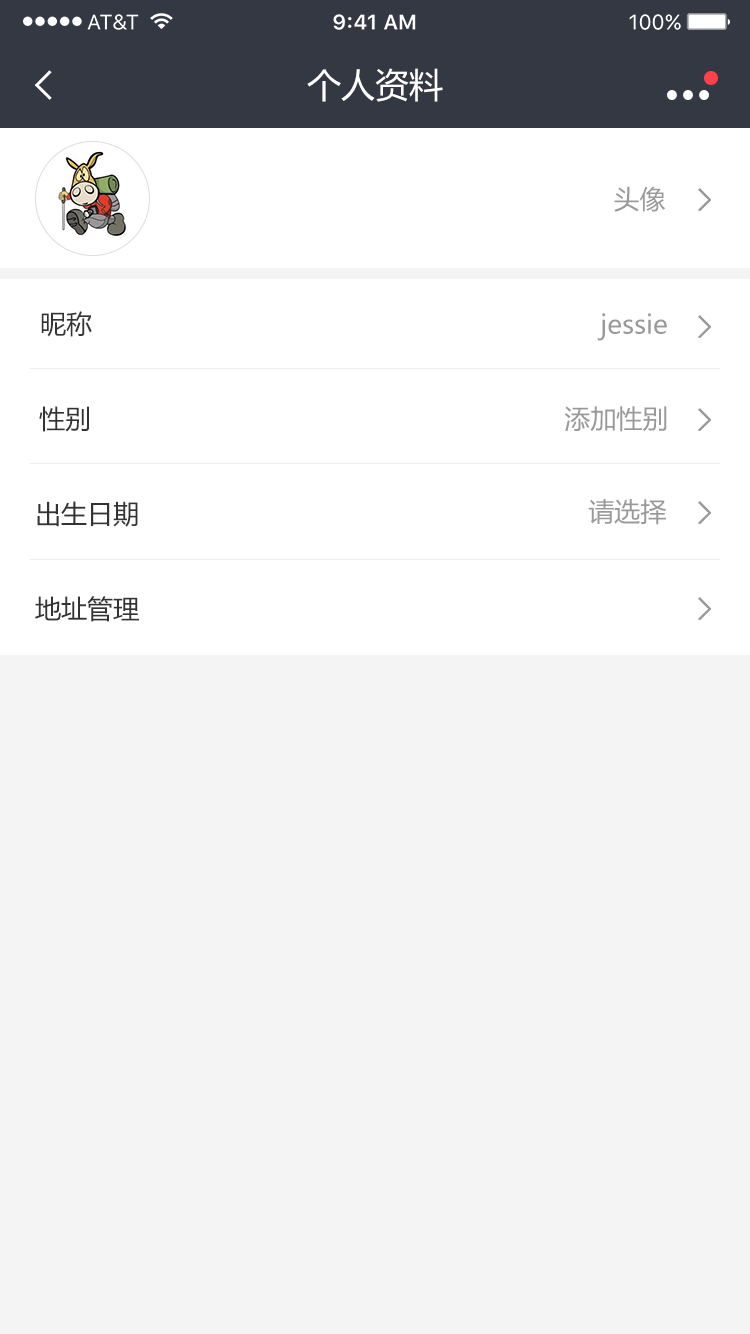
<style>
.page{position:relative;width:750px;height:1334px;background:#f4f4f4}
.page>*{position:absolute;margin:0}
.t1{font:34px "MicrosoftYaHei";color:#ffffff}
.t2{font:26px "MicrosoftYaHei";color:#999999}
.t3{font:26px "MicrosoftYaHei";color:#333333}
</style>
<div class="page">
<p class="t1" style="left:307px;top:68px;width:136px;height:34px">个人资料</p>
<p class="t2" style="left:614px;top:186px;width:52px;height:26px">头像</p>
<p class="t3" style="left:41px;top:311px;width:51px;height:26px">昵称</p>
<p class="t2" style="left:597px;top:313px;width:70px;height:28px">jessie</p>
<p class="t3" style="left:39px;top:406px;width:50px;height:26px">性别</p>
<p class="t2" style="left:564px;top:406px;width:103px;height:26px">添加性别</p>
<p class="t3" style="left:37px;top:501px;width:101px;height:26px">出生日期</p>
<p class="t2" style="left:588px;top:499px;width:78px;height:26px">请选择</p>
<p class="t3" style="left:35px;top:596px;width:104px;height:26px">地址管理</p>
</div>
